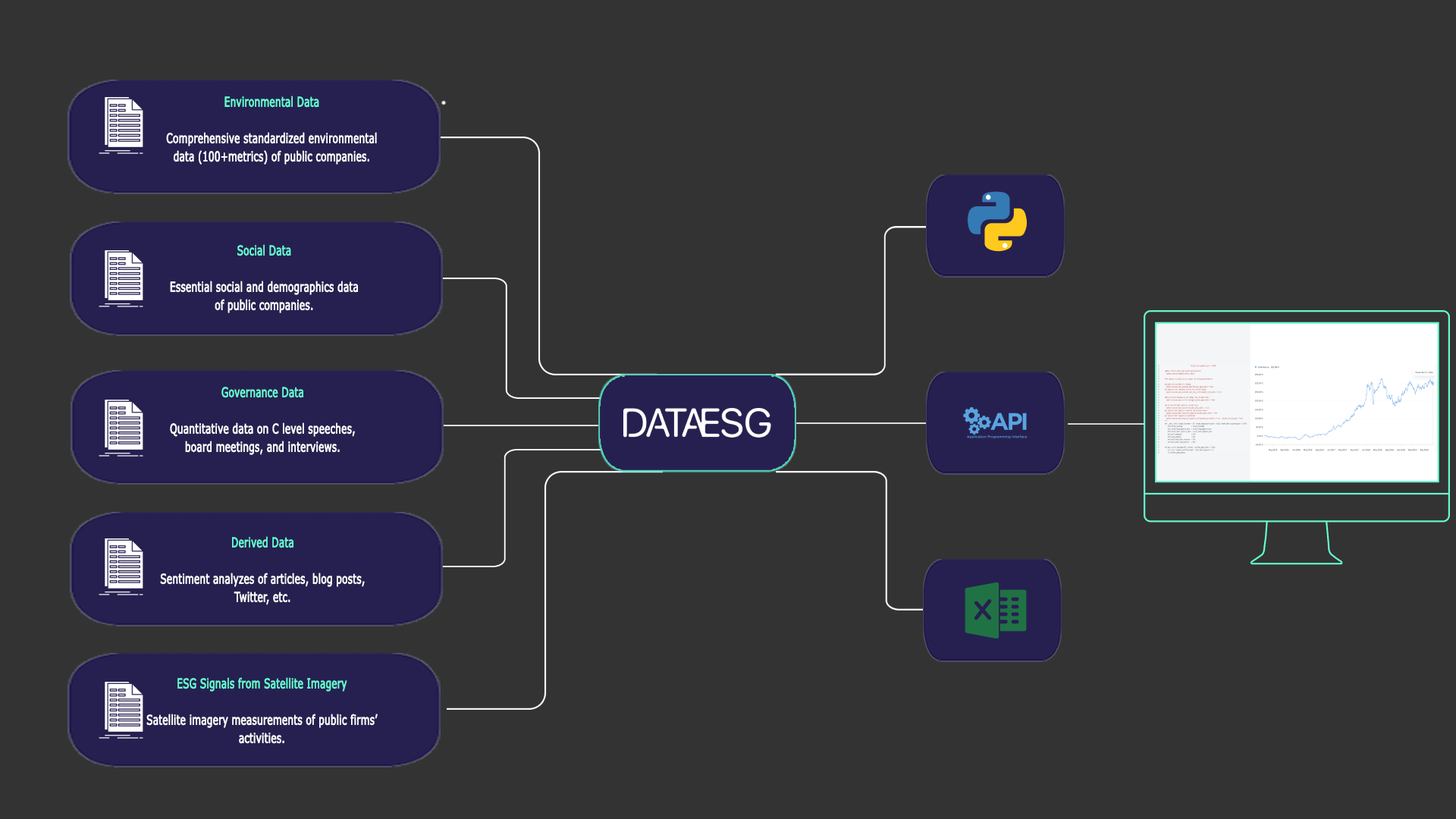
<style>
.page{position:relative;width:1456px;height:819px;background:#333333}
.page>*{position:absolute;margin:0}
.t1{font:13.5px/18.2px "Verdana";color:#ffffff;font-weight:bold;scale:0.67 1}
.t2{font:13.5px/18.2px "Verdana";color:#66ffd1;font-weight:bold;scale:0.67 1}
</style>
<div class="page">
<p class="t1" style="left:166px;top:96px;width:211px;height:69px;text-align:center"><span class="t2">Environmental Data <br></span><br>Comprehensive standardized environmental<br>data (100+metrics) of public companies.</p>
<p class="t1" style="left:170px;top:244px;width:188px;height:69px;text-align:center"><span class="t2">Social Data<br></span><br>Essential social and demographics data<br>of public companies.</p>
<p class="t1" style="left:170px;top:387px;width:185px;height:68px;text-align:center"><span class="t2">Governance Data<br></span><br>Quantitative data on C level speeches,<br>board meetings, and interviews.</p>
<p class="t1" style="left:160px;top:536px;width:205px;height:69px;text-align:center"><span class="t2">Derived Data<br></span><br>Sentiment analyzes of articles, blog posts, Twitter, etc.</p>
<p class="t1" style="left:146px;top:677px;width:232px;height:67px;text-align:center"><span class="t2">ESG Signals from Satellite Imagery<br></span><br>Satellite imagery measurements of public firms’ activities.</p>
</div>
